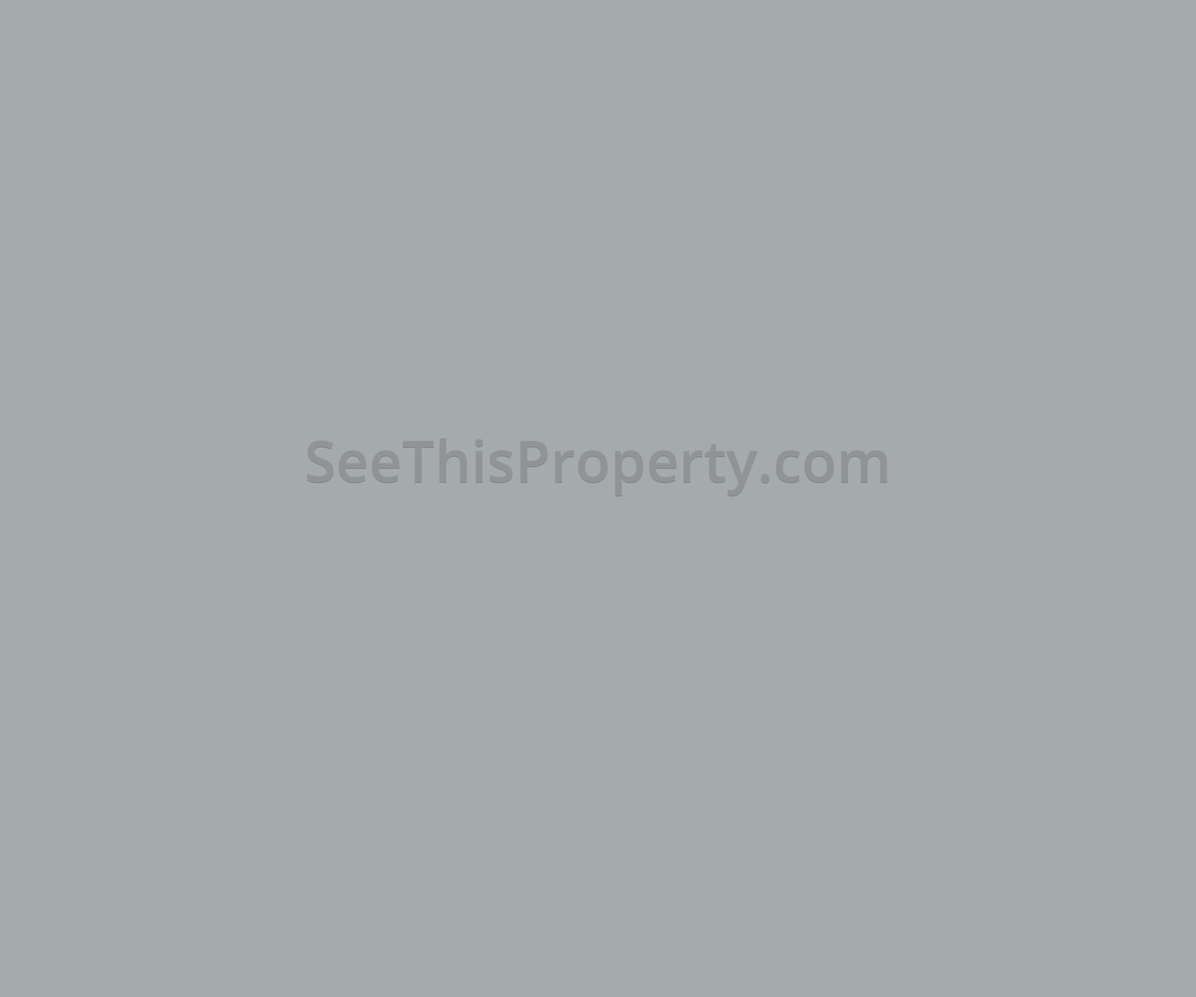
<style>
.page{position:relative;width:1196px;height:997px;background:#a5abac}
.page>*{position:absolute;margin:0}
.t1{font:57.4px "OpenSans-Semibold";color:#919496}
</style>
<div class="page">
<p class="t1" style="left:307px;top:438px;width:580px;height:58px">SeeThisProperty.com</p>
</div>
